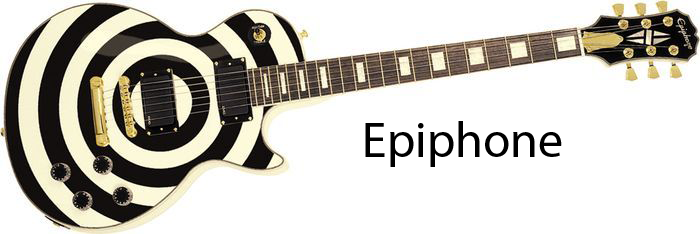
<style>
.page{position:relative;width:700px;height:234px;background:#ffffff}
.page>*{position:absolute;margin:0}
.t1{font:50px "MyriadPro-Regular";color:#000000}
</style>
<div class="page">
<p class="t1" style="left:365px;top:121px;width:197px;height:46px">Epiphone</p>
</div>
